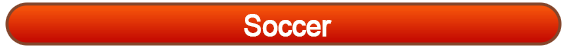
<style>
.page{position:relative;width:570px;height:50px}
.page>*{position:absolute;margin:0}
.t1{font:30.6px "ArialMT";letter-spacing:-0.025em;color:#ffffff;font-weight:bold;scale:0.91 1}
</style>
<div class="page">
<p class="t1" style="left:244px;top:14px;width:88px;height:23px">Soccer</p>
</div>
